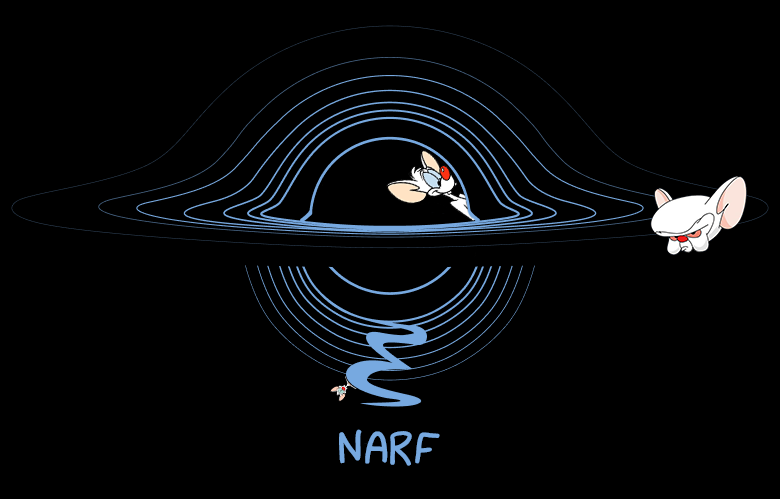
<style>
.page{position:relative;width:780px;height:499px;background:#000000}
.page>*{position:absolute;margin:0}
.t1{font:48px "xkcdScript";color:#77a9e0}
</style>
<div class="page">
<p class="t1" style="left:339px;top:429px;width:101px;height:37px">NARF</p>
</div>
